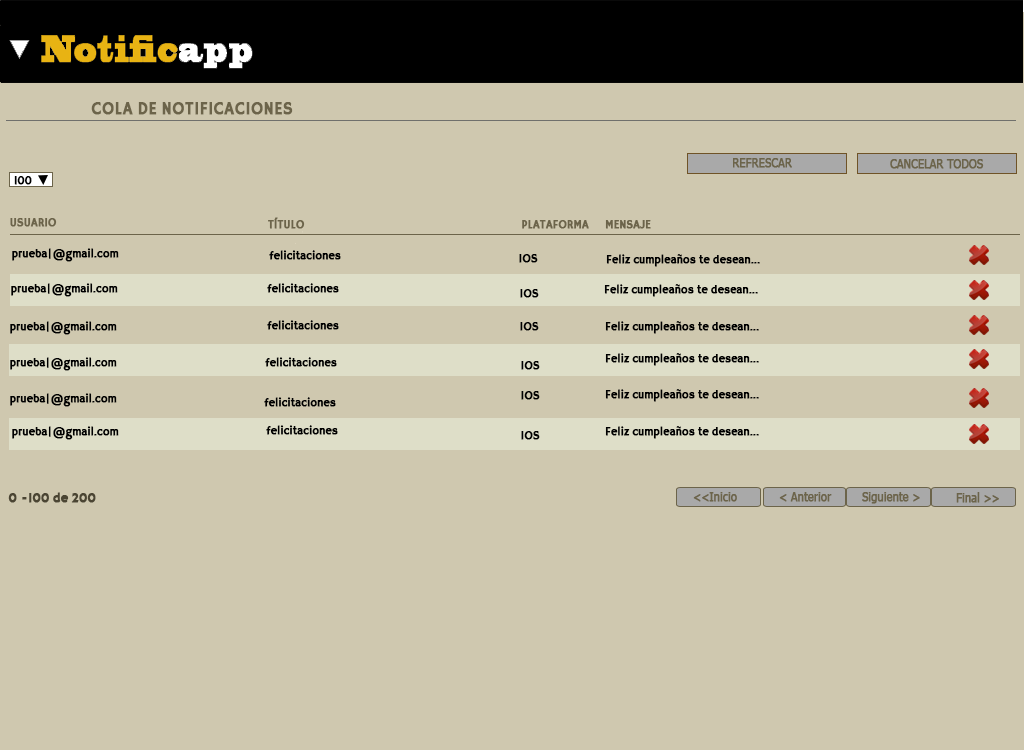
<style>
.page{position:relative;width:1024px;height:750px;background:#cfc8af}
.page>*{position:absolute;margin:0}
.t1{font:18px "HammersmithOne";color:#6c644a;font-weight:bold;scale:0.9 1}
.t2{font:12px "Tahoma";color:#6c644a;font-weight:bold;scale:0.9 1}
.t3{font:12px "HammersmithOne";color:#000000;font-weight:bold;scale:0.9 1}
.t4{font:12px "HammersmithOne";color:#6c644a;font-weight:bold;scale:0.9 1}
.t5{font:14px "HammersmithOne";color:#4b4533;font-weight:bold;scale:0.9 1}
</style>
<div class="page">
<p class="t1" style="left:91px;top:102px;width:202px;height:13px">COLA DE NOTIFICACIONES</p>
<p class="t2" style="left:733px;top:158px;width:59px;height:10px">REFRESCAR</p>
<p class="t2" style="left:890px;top:159px;width:94px;height:10px">CANCELAR TODOS</p>
<p class="t3" style="left:14px;top:176px;width:18px;height:9px">100</p>
<p class="t4" style="left:10px;top:218px;width:47px;height:9px">USUARIO</p>
<p class="t4" style="left:268px;top:217px;width:37px;height:12px">TÍTULO</p>
<p class="t4" style="left:522px;top:220px;width:67px;height:9px">PLATAFORMA</p>
<p class="t4" style="left:605px;top:220px;width:46px;height:9px">MENSAJE</p>
<p class="t3" style="left:12px;top:248px;width:107px;height:14px">prueba|@gmail.com</p>
<p class="t3" style="left:269px;top:250px;width:72px;height:10px">felicitaciones</p>
<p class="t3" style="left:519px;top:254px;width:19px;height:9px">IOS</p>
<p class="t3" style="left:606px;top:254px;width:154px;height:13px">Feliz cumpleaños te desean...</p>
<p class="t3" style="left:11px;top:283px;width:107px;height:14px">prueba|@gmail.com</p>
<p class="t3" style="left:267px;top:283px;width:72px;height:10px">felicitaciones</p>
<p class="t3" style="left:520px;top:289px;width:19px;height:9px">IOS</p>
<p class="t3" style="left:604px;top:284px;width:154px;height:13px">Feliz cumpleaños te desean...</p>
<p class="t3" style="left:10px;top:321px;width:107px;height:14px">prueba|@gmail.com</p>
<p class="t3" style="left:267px;top:320px;width:72px;height:10px">felicitaciones</p>
<p class="t3" style="left:520px;top:322px;width:19px;height:9px">IOS</p>
<p class="t3" style="left:605px;top:321px;width:154px;height:13px">Feliz cumpleaños te desean...</p>
<p class="t3" style="left:605px;top:353px;width:154px;height:13px">Feliz cumpleaños te desean...</p>
<p class="t3" style="left:10px;top:357px;width:107px;height:14px">prueba|@gmail.com</p>
<p class="t3" style="left:265px;top:357px;width:72px;height:10px">felicitaciones</p>
<p class="t3" style="left:521px;top:361px;width:19px;height:9px">IOS</p>
<p class="t3" style="left:605px;top:389px;width:154px;height:13px">Feliz cumpleaños te desean...</p>
<p class="t3" style="left:10px;top:393px;width:107px;height:14px">prueba|@gmail.com</p>
<p class="t3" style="left:264px;top:397px;width:72px;height:10px">felicitaciones</p>
<p class="t3" style="left:521px;top:391px;width:19px;height:9px">IOS</p>
<p class="t3" style="left:266px;top:425px;width:72px;height:10px">felicitaciones</p>
<p class="t3" style="left:12px;top:426px;width:107px;height:14px">prueba|@gmail.com</p>
<p class="t3" style="left:521px;top:431px;width:19px;height:9px">IOS</p>
<p class="t3" style="left:605px;top:426px;width:154px;height:13px">Feliz cumpleaños te desean...</p>
<p class="t5" style="left:8px;top:492px;width:88px;height:11px">0 -100 de 200</p>
<p class="t2" style="left:693px;top:492px;width:44px;height:10px">&lt;&lt;Inicio</p>
<p class="t2" style="left:779px;top:492px;width:53px;height:10px">&lt; Anterior</p>
<p class="t2" style="left:862px;top:492px;width:58px;height:12px">Siguiente &gt;</p>
<p class="t2" style="left:956px;top:492px;width:43px;height:11px">Final &gt;&gt;</p>
</div>
